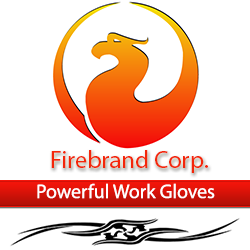
<style>
.page{position:relative;width:250px;height:250px;background:#ffffff}
.page>*{position:absolute;margin:0}
.t1{font:24.7px "MyriadPro-Regular";color:#f4260a}
.t2{font:19.8px "MyriadPro-Regular";color:#ffffff}
</style>
<div class="page">
<p class="t1" style="left:51px;top:150px;width:157px;height:23px">Firebrand Corp.</p>
<p class="t2" style="left:37px;top:183px;width:178px;height:16px">Powerful Work Gloves</p>
</div>
